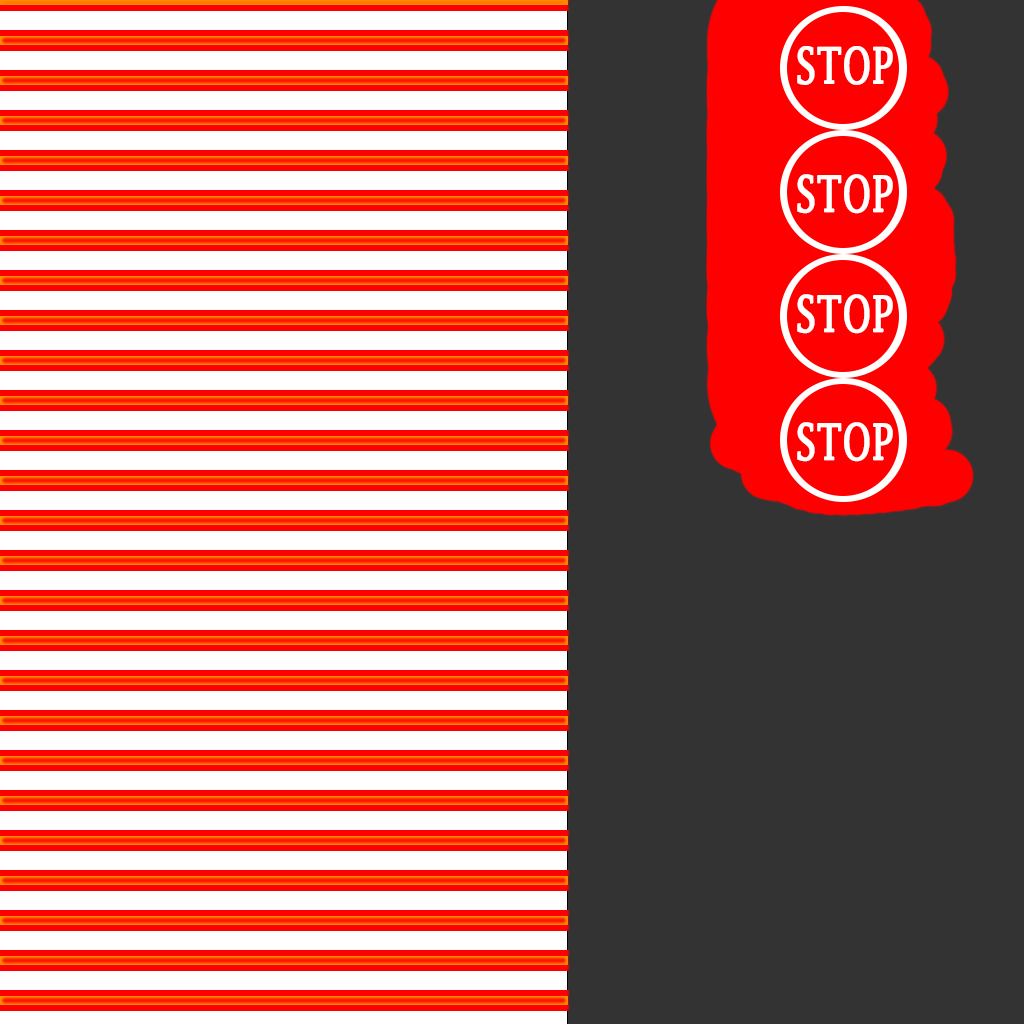
<style>
.page{position:relative;width:1024px;height:1024px;background:#333333}
.page>*{position:absolute;margin:0}
.t1{font:49.6px "LucidaFax";color:#ffffff;font-weight:bold;scale:0.73 1}
</style>
<div class="page">
<p class="t1" style="left:797px;top:46px;width:96px;height:39px">STOP</p>
<p class="t1" style="left:797px;top:174px;width:96px;height:40px">STOP</p>
<p class="t1" style="left:797px;top:294px;width:96px;height:40px">STOP</p>
<p class="t1" style="left:797px;top:422px;width:96px;height:40px">STOP</p>
</div>
